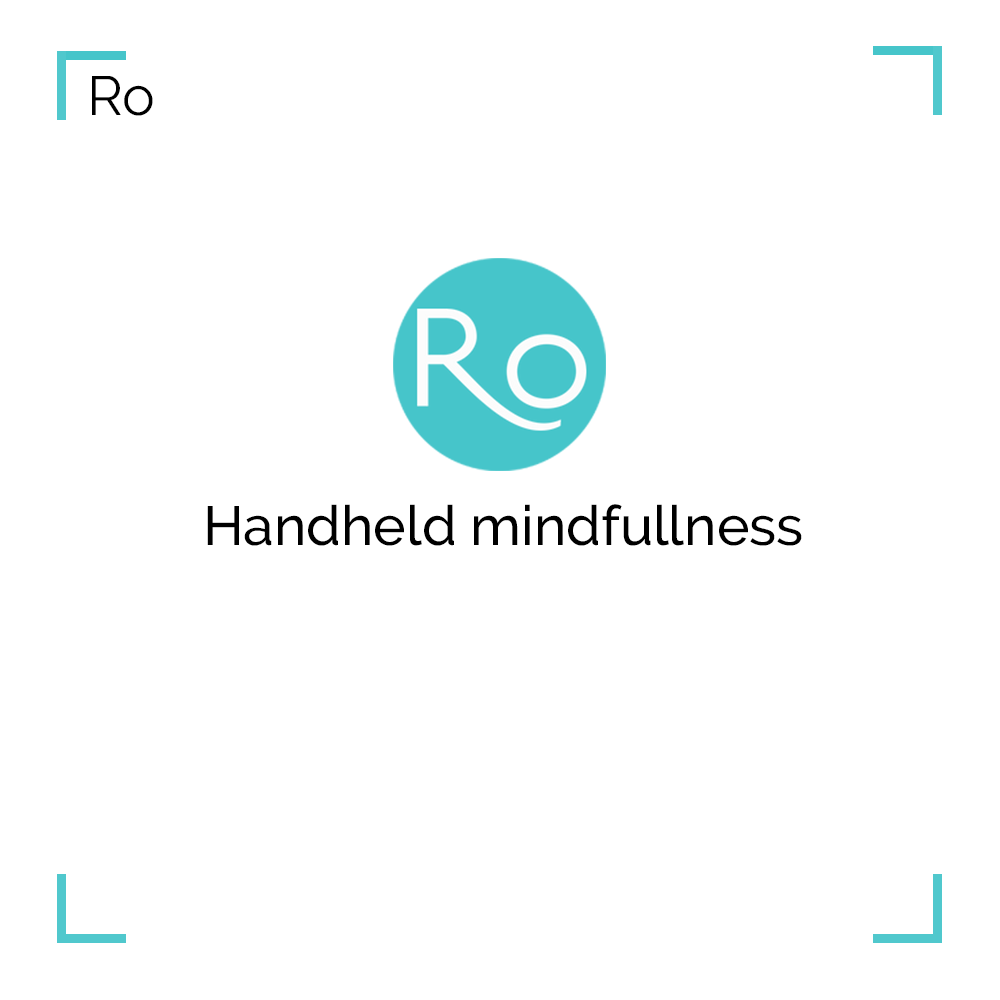
<style>
.page{position:relative;width:1000px;height:1000px;background:#ffffff}
.page>*{position:absolute;margin:0}
.t1{font:55px "Raleway-Regular";color:#000000}
.t2{font:55px "Raleway-Medium";color:#000000}
</style>
<div class="page">
<p class="t1" style="left:92px;top:76px;width:61px;height:40px">Ro</p>
<p class="t2" style="left:207px;top:504px;width:595px;height:42px">Handheld mindfullness</p>
</div>
